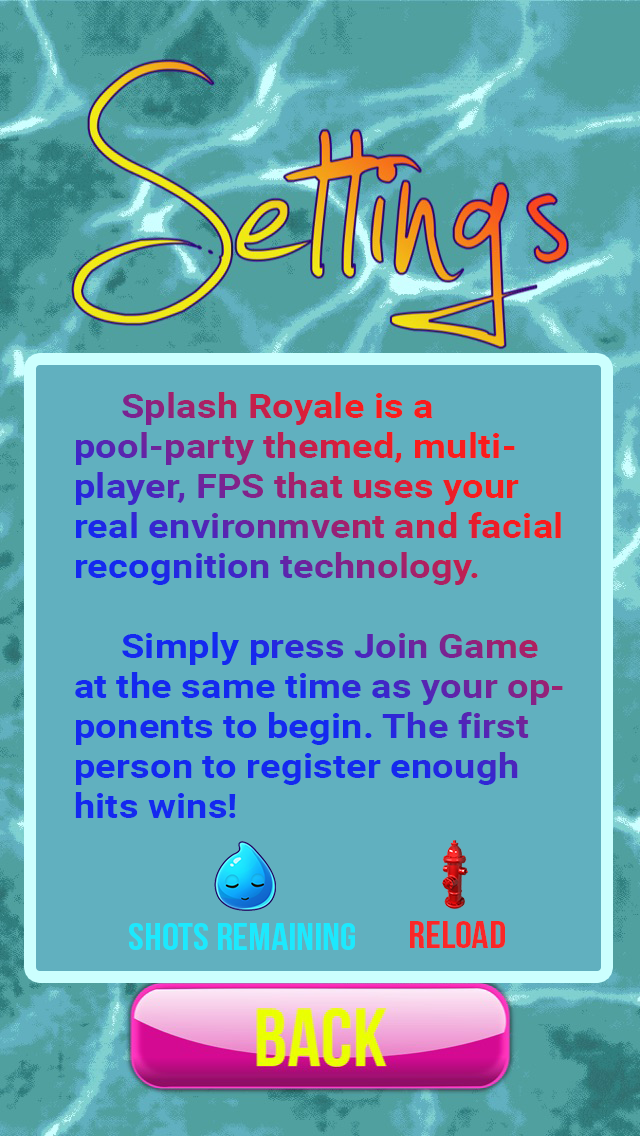
<style>
.page{position:relative;width:640px;height:1136px;background:#61b0bf}
.page>*{position:absolute;margin:0}
.t1{font:34.2px/40px "Roboto-Bold";scale:1.11 1}
.t2{font:37.9px "BebasNeue";color:#1ce9fe;scale:1.11 1}
.t3{font:37.9px "BebasNeue";color:#fa2727;scale:1.11 1}
</style>
<div class="page">
<p class="t1" style="left:75px;top:392px;width:488px;height:426px">Splash Royale is a pool-party themed, multiplayer, FPS that uses your real environmvent and facial recognition technology.<br><br>     Simply press Join Game at the same time as your opponents to begin. The first person to register enough hits wins!</p>
<p class="t2" style="left:129px;top:923px;width:226px;height:27px">Shots Remaining</p>
<p class="t3" style="left:410px;top:921px;width:95px;height:27px">Reload</p>
</div>
